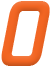
<style>
.page{position:relative;width:50px;height:68px;background:#ffffff}
.page>*{position:absolute;margin:0}
.t1{font:73.3px "Zekton-BoldItalic";letter-spacing:-0.005em;color:#f26522;text-transform:uppercase;font-weight:bold;scale:0.91 1}
</style>
<div class="page">
<p class="t1" style="left:1px;top:1px;width:49px;height:65px">0</p>
</div>
